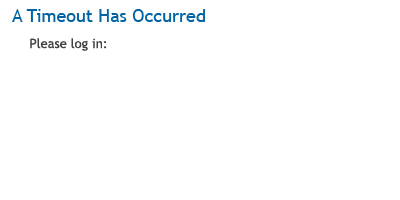
<style>
.page{position:relative;width:400px;height:200px;background:#ffffff}
.page>*{position:absolute;margin:0}
.t1{font:18px "TrebuchetMS";color:#0063a4}
.t2{font:13px "TrebuchetMS";color:#434343}
</style>
<div class="page">
<p class="t1" style="left:12px;top:9px;width:193px;height:13px">A Timeout Has Occurred</p>
<p class="t2" style="left:30px;top:38px;width:77px;height:13px">Please log in:</p>
</div>
